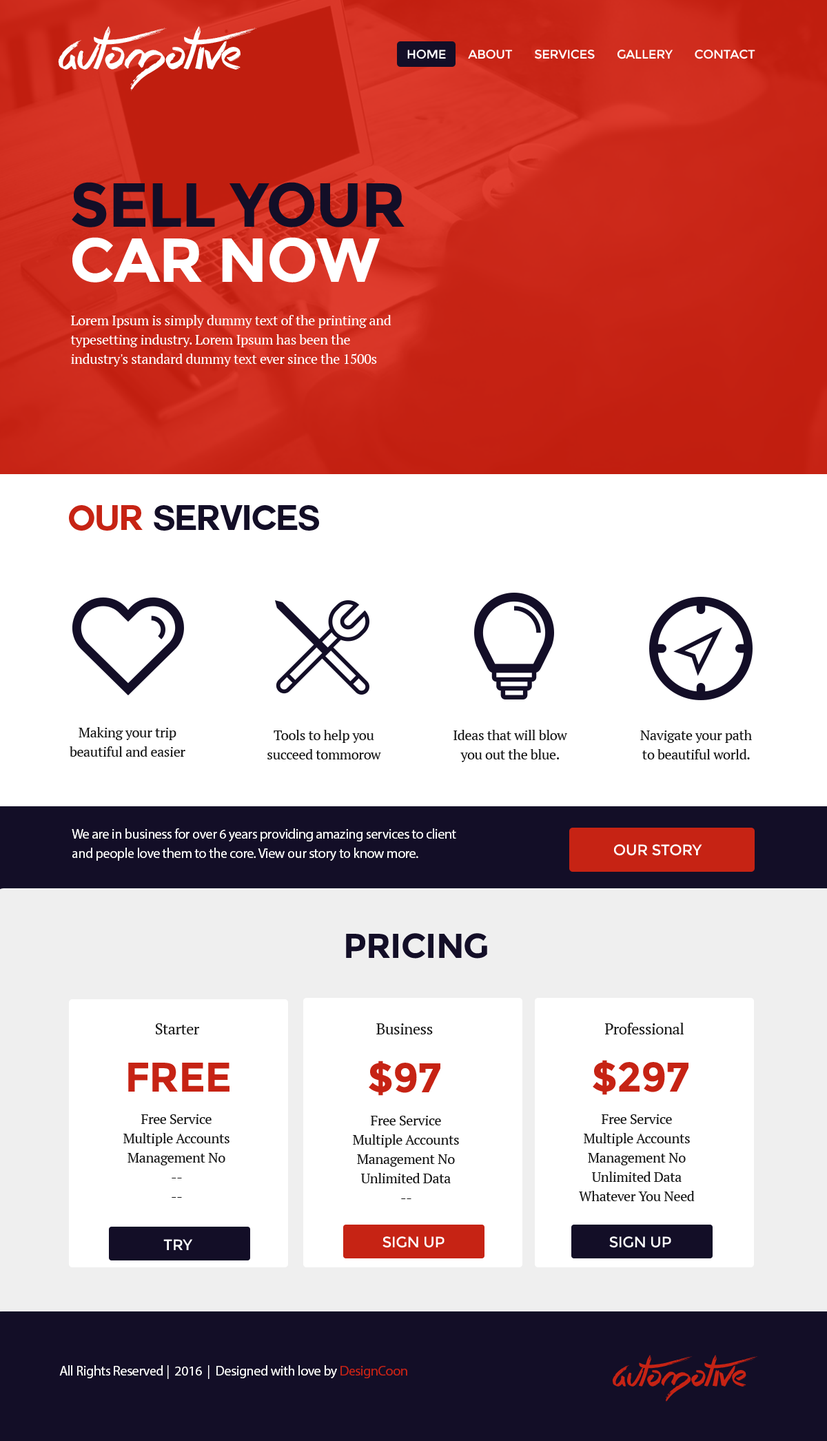
<style>
.page{position:relative;width:827px;height:1441px;background:#ffffff}
.page>*{position:absolute;margin:0}
.t1{font:60.9px "QuiteChocolatey";letter-spacing:-0.02em;color:#ffffff}
.t2{font:12.4px "Montserrat-Regular";letter-spacing:-0.02em;color:#ffffff}
.t3{font:62px/55.1px "Montserrat-Bold";letter-spacing:-0.02em;color:#130e27}
.t4{font:62px/55.1px "Montserrat-Bold";letter-spacing:-0.02em;color:#ffffff}
.t5{font:13.8px/19.3px "PTSerif-Regular";letter-spacing:-0.02em;color:#ffffff}
.t6{font:34.5px "Couture-Bold";letter-spacing:-0.02em;color:#130e27}
.t7{font:34.5px "Couture-Bold";letter-spacing:-0.02em;color:#c62314}
.t8{font:13.8px/19.3px "PTSerif-Regular";letter-spacing:-0.02em;color:#161616}
.t9{font:13.8px/19.3px "MyriadPro-Regular";letter-spacing:-0.02em;color:#ffffff}
.t10{font:15.2px "Montserrat-Regular";letter-spacing:-0.02em;color:#ffffff}
.t11{font:34.5px "Montserrat-Bold";letter-spacing:-0.02em;color:#130e27}
.t12{font:15.2px "PTSerif-Regular";letter-spacing:-0.02em;color:#161616}
.t13{font:41.4px "Montserrat-Bold";letter-spacing:-0.02em;color:#c62314}
.t14{font:44.4px "QuiteChocolatey";letter-spacing:-0.02em;color:#c62314}
.t15{font:13.8px "MyriadPro-Regular";letter-spacing:-0.02em;color:#ffffff}
.t16{font:13.8px "MyriadPro-Regular";letter-spacing:-0.02em;color:#c62314}
</style>
<div class="page">
<p class="t1" style="left:58px;top:26px;width:199px;height:65px">automotive</p>
<p class="t2" style="left:407px;top:49px;width:349px;height:10px">HOME       ABOUT       SERVICES       GALLERY       CONTACT</p>
<p class="t3" style="left:72px;top:182px;width:333px;height:101px">SELL YOUR<br><span class="t4">CAR NOW</span></p>
<p class="t5" style="left:70px;top:315px;width:322px;height:52px">Lorem Ipsum is simply dummy text of the printing and typesetting industry. Lorem Ipsum has been the industry's standard dummy text ever since the 1500s</p>
<p class="t6" style="left:69px;top:505px;width:250px;height:26px"><span class="t7">OUR </span>SERVICES</p>
<p class="t8" style="left:70px;top:727px;width:115px;height:30px;text-align:center">Making your trip<br>beautiful and easier</p>
<p class="t8" style="left:267px;top:730px;width:114px;height:30px;text-align:center">Tools to help you<br>succeed tommorow</p>
<p class="t8" style="left:454px;top:730px;width:113px;height:32px;text-align:center">Ideas that will blow<br>you out the blue.</p>
<p class="t8" style="left:640px;top:730px;width:112px;height:30px;text-align:center">Navigate your path<br>to beautiful world.</p>
<p class="t9" style="left:72px;top:829px;width:384px;height:32px">We are in business for over 6 years providing amazing services to client<br>and people love them to the core. View our story to know more.</p>
<p class="t10" style="left:614px;top:844px;width:88px;height:12px">OUR STORY</p>
<p class="t11" style="left:346px;top:933px;width:141px;height:26px">PRICING</p>
<p class="t12" style="left:156px;top:1024px;width:44px;height:11px">Starter</p>
<p class="t12" style="left:376px;top:1024px;width:57px;height:11px">Business</p>
<p class="t12" style="left:605px;top:1023px;width:79px;height:12px">Professional</p>
<p class="t13" style="left:369px;top:1061px;width:72px;height:35px">$97</p>
<p class="t13" style="left:593px;top:1060px;width:96px;height:35px">$297</p>
<p class="t13" style="left:128px;top:1063px;width:102px;height:29px">FREE</p>
<p class="t8" style="left:123px;top:1115px;width:107px;height:83px;text-align:center">Free Service<br>Multiple Accounts<br>Management No<br>--<br>--</p>
<p class="t8" style="left:353px;top:1116px;width:106px;height:83px;text-align:center">Free Service<br>Multiple Accounts<br>Management No<br>Unlimited Data<br>--</p>
<p class="t8" style="left:579px;top:1115px;width:116px;height:87px;text-align:center">Free Service<br>Multiple Accounts<br>Management No<br>Unlimited Data<br>Whatever You Need</p>
<p class="t10" style="left:163px;top:1239px;width:30px;height:12px">TRY</p>
<p class="t10" style="left:383px;top:1237px;width:62px;height:11px">SIGN UP</p>
<p class="t10" style="left:609px;top:1237px;width:62px;height:11px">SIGN UP</p>
<p class="t14" style="left:612px;top:1355px;width:146px;height:48px">automotive</p>
<p class="t15" style="left:59px;top:1366px;width:348px;height:13px">All Rights Reserved |  2016  |  Designed with love by <span class="t16">DesignCoon</span></p>
</div>
